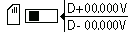
<style>
.page{position:relative;width:128px;height:32px;background:#ffffff}
.page>*{position:absolute;margin:0}
.t1{font:12px "AdobeHeitiStd-Regular";color:#000500}
</style>
<div class="page">
<p class="t1" style="left:68px;top:3px;width:15px;height:10px">D+</p>
<p class="t1" style="left:85px;top:3px;width:33px;height:10px">00.000</p>
<p class="t1" style="left:120px;top:3px;width:7px;height:10px">V</p>
<p class="t1" style="left:68px;top:20px;width:12px;height:10px">D-</p>
<p class="t1" style="left:85px;top:20px;width:33px;height:10px">00.000</p>
<p class="t1" style="left:119px;top:20px;width:7px;height:10px">V</p>
</div>
